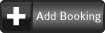
<style>
.page{position:relative;width:105px;height:33px}
.page>*{position:absolute;margin:0}
.t1{font:12.4px "Colaborate-Regular";color:#ffffff}
</style>
<div class="page">
<p class="t1" style="left:36px;top:11px;width:65px;height:12px">Add Booking</p>
</div>
